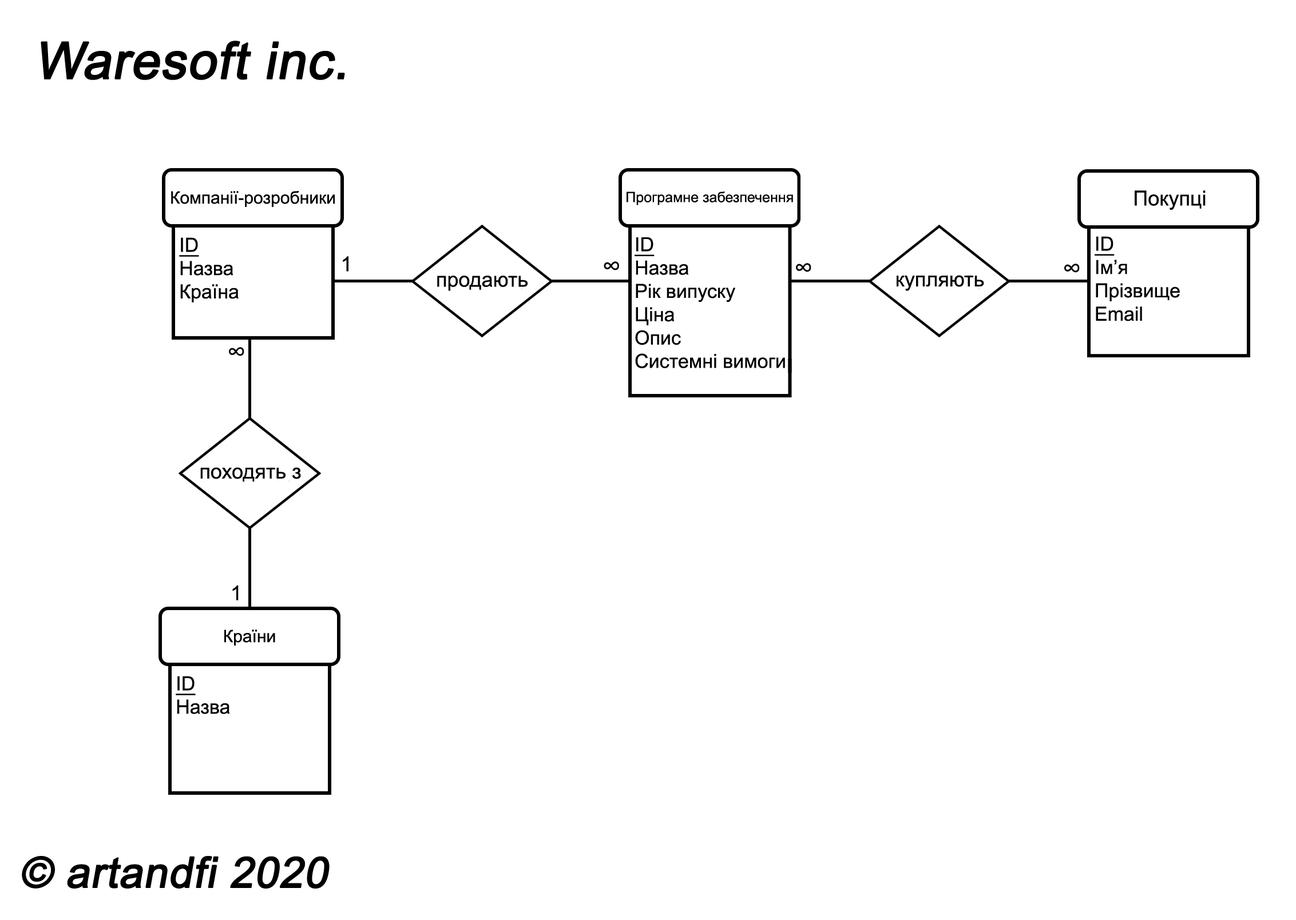
<style>
.page{position:relative;width:1296px;height:920px;background:#ffffff}
.page>*{position:absolute;margin:0}
.t1{font:50.9px "ArialMT";color:#000000;font-weight:bold;font-style:italic}
.t2{font:17.2px "ArialMT";color:#000000}
.t3{font:14.3px "ArialMT";color:#000000}
.t4{font:20.6px "ArialMT";color:#000000}
.t5{font:19.4px "ArialMT";color:#000000}
.t6{font:19.4px "ArialMT";color:#000000;text-decoration:underline}
.t7{font:19.5px "ArialMT";color:#000000}
.t8{font:19.5px "ArialMT";color:#000000;text-decoration:underline}
.t9{font:26.3px "ArialMT";color:#000000}
.t10{font:42.3px "ArialMT";color:#000000;font-weight:bold;font-style:italic}
</style>
<div class="page">
<p class="t1" style="left:41px;top:41px;width:304px;height:39px">Waresoft inc.</p>
<p class="t2" style="left:171px;top:191px;width:164px;height:16px">Компанії-розробники</p>
<p class="t3" style="left:626px;top:192px;width:167px;height:13px">Програмне забезпечення</p>
<p class="t4" style="left:1134px;top:190px;width:71px;height:20px">Покупці</p>
<p class="t5" style="left:179px;top:237px;width:60px;height:66px"><span class="t6">ID<br></span>Назва<br>Країна</p>
<p class="t5" style="left:634px;top:237px;width:151px;height:131px"><span class="t6">ID<br></span>Назва<br>Рік випуску<br>Ціна<br>Опис<br>Системні вимоги</p>
<p class="t7" style="left:1094px;top:236px;width:85px;height:85px"><span class="t8">ID<br></span>Ім’я<br>Прізвище<br>Email</p>
<p class="t4" style="left:343px;top:256px;width:5px;height:16px">1</p>
<p class="t9" style="left:603px;top:261px;width:16px;height:10px">∞</p>
<p class="t9" style="left:796px;top:263px;width:15px;height:9px">∞</p>
<p class="t9" style="left:1064px;top:264px;width:15px;height:9px">∞</p>
<p class="t4" style="left:437px;top:276px;width:91px;height:15px">продають</p>
<p class="t4" style="left:896px;top:275px;width:88px;height:16px">купляють</p>
<p class="t9" style="left:229px;top:347px;width:15px;height:9px">∞</p>
<p class="t4" style="left:200px;top:467px;width:101px;height:15px">походять з</p>
<p class="t4" style="left:232px;top:585px;width:7px;height:16px">1</p>
<p class="t2" style="left:224px;top:630px;width:51px;height:16px">Країни</p>
<p class="t5" style="left:176px;top:676px;width:54px;height:38px"><span class="t6">ID<br></span>Назва</p>
<p class="t10" style="left:22px;top:856px;width:307px;height:33px">© artandfi 2020</p>
</div>
